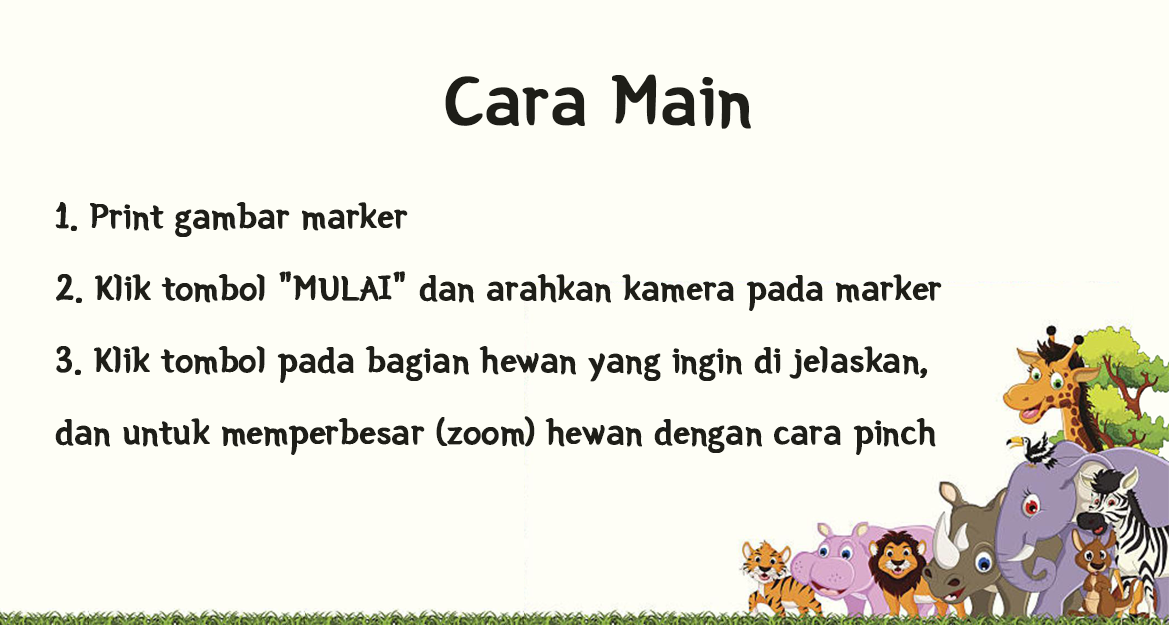
<style>
.page{position:relative;width:1169px;height:625px;background:#fefef6}
.page>*{position:absolute;margin:0}
.t1{font:72px "BMYEONSUNG-OTF";color:#1e1e18;font-weight:bold}
.t2{font:36px/72px "BMYEONSUNG-OTF";color:#1e1e18;font-weight:bold}
</style>
<div class="page">
<p class="t1" style="left:445px;top:74px;width:306px;height:55px">Cara Main</p>
<p class="t2" style="left:55px;top:202px;width:887px;height:253px">1. Print gambar marker<br>2. Klik tombol "MULAI" dan arahkan kamera pada marker<br>3. Klik tombol pada bagian hewan yang ingin di jelaskan, <br>dan untuk memperbesar (zoom) hewan dengan cara pinch</p>
</div>
